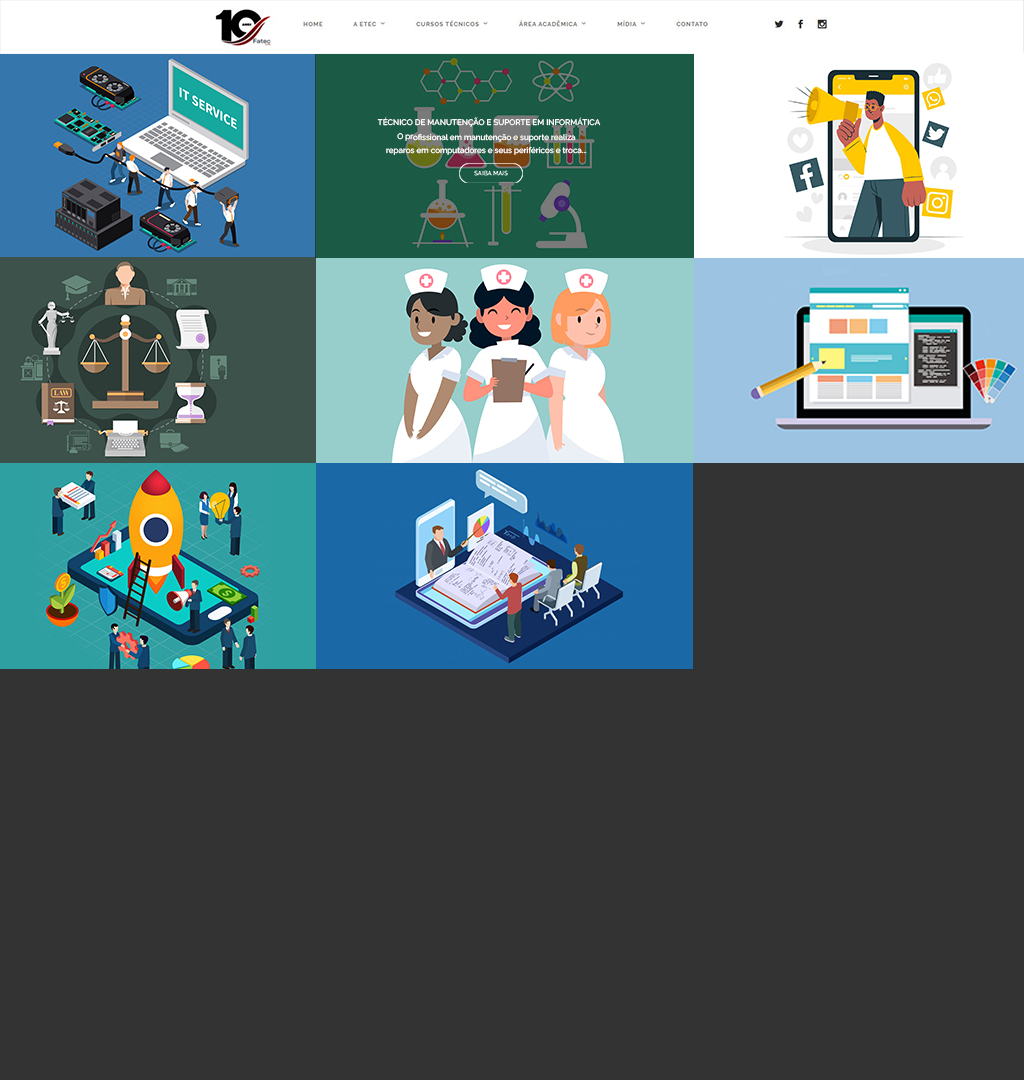
<style>
.page{position:relative;width:1024px;height:1080px;background:#333333}
.page>*{position:absolute;margin:0}
.t1{font:8px "Raleway-Medium";color:#ffffff}
.t2{font:8px/13.3px "Raleway-Medium";color:#ffffff}
</style>
<div class="page">
<p class="t1" style="left:377px;top:117px;width:224px;height:10px">TÉCNICO DE MANUTENÇÃO E SUPORTE EM INFORMÁTICA</p>
<p class="t2" style="left:386px;top:133px;width:201px;height:22px;text-align:center">O profissional em manutenção e suporte realiza<br>reparos em computadores e seus periféricos e troca...</p>
</div>
